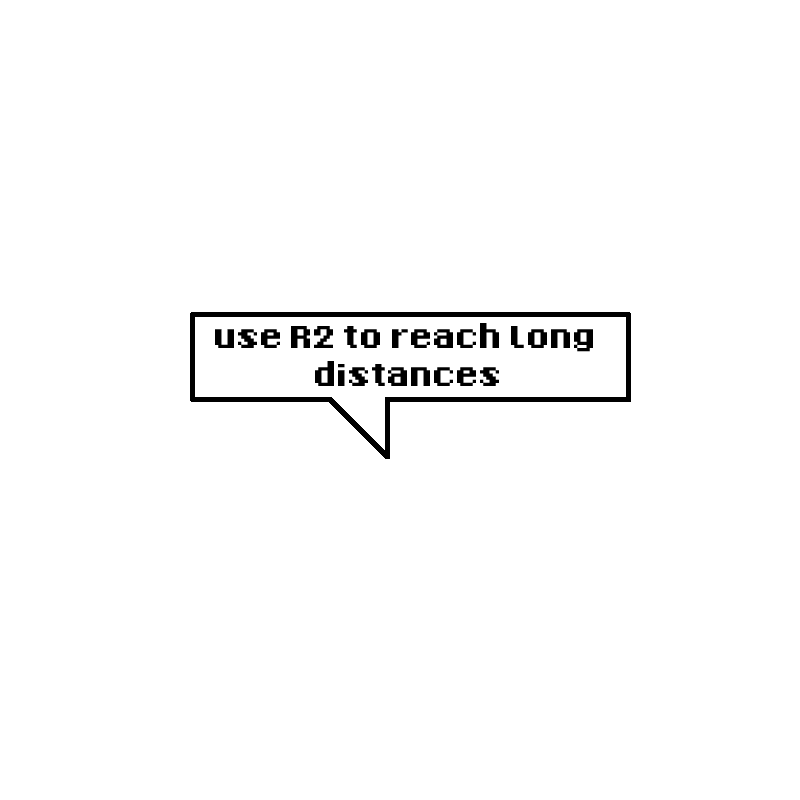
<style>
.page{position:relative;width:800px;height:800px;background:#ffffff}
.page>*{position:absolute;margin:0}
.t1{font:12px/37.5px "8-Bit-Madness";letter-spacing:-0.04em;color:#000000}
</style>
<div class="page">
<p class="t1" style="left:215px;top:323px;width:378px;height:63px;text-align:center">use R2 to reach long <br>distances</p>
</div>
